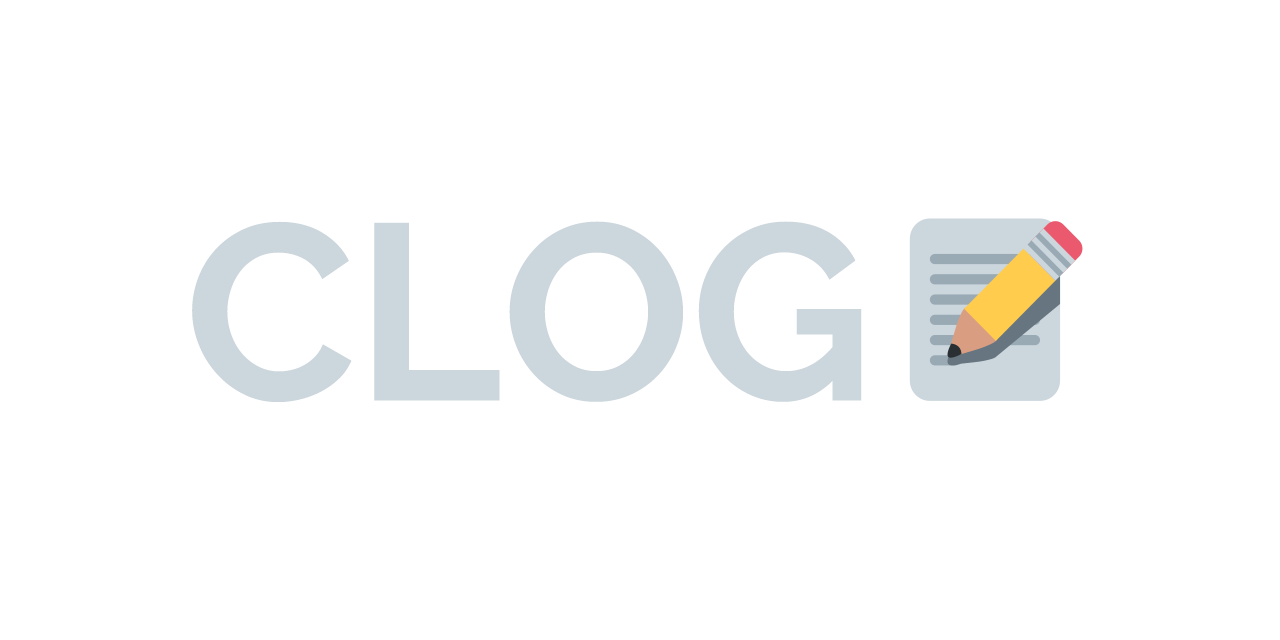
<style>
.page{position:relative;width:1280px;height:640px;background:#ffffff}
.page>*{position:absolute;margin:0}
.t1{font:250px "Raleway-Bold";color:#ccd6dd}
</style>
<div class="page">
<p class="t1" style="left:192px;top:221px;width:670px;height:181px">CLOG</p>
</div>
